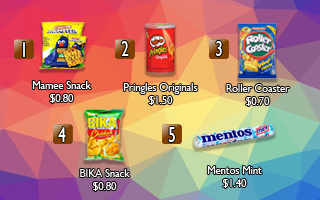
<style>
.page{position:relative;width:320px;height:200px}
.page>*{position:absolute;margin:0}
.t1{font:21.8px "GillSansMT";color:#ffffff;scale:0.67 1}
.t2{font:10.5px "GillSansMT";color:#ffffff}
</style>
<div class="page">
<p class="t1" style="left:121px;top:41px;width:8px;height:15px">2</p>
<p class="t1" style="left:216px;top:41px;width:6px;height:15px">3</p>
<p class="t2" style="left:32px;top:81px;width:59px;height:22px;text-align:center">Mamee Snack<br>$0.80</p>
<p class="t2" style="left:123px;top:83px;width:75px;height:22px;text-align:center">Pringles Originals<br>$1.50</p>
<p class="t2" style="left:226px;top:84px;width:64px;height:22px;text-align:center">Roller Coaster<br>$0.70</p>
<p class="t1" style="left:58px;top:127px;width:8px;height:15px">4</p>
<p class="t1" style="left:168px;top:127px;width:7px;height:15px">5</p>
<p class="t2" style="left:80px;top:169px;width:50px;height:22px;text-align:center">BIKA Snack<br>$0.80</p>
<p class="t2" style="left:207px;top:166px;width:55px;height:22px;text-align:center">Mentos Mint<br>$1.40</p>
</div>
